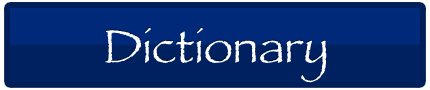
<style>
.page{position:relative;width:430px;height:90px;background:#002160}
.page>*{position:absolute;margin:0}
.t1{font:48px "Papyrus";color:#ffffff}
</style>
<div class="page">
<p class="t1" style="left:105px;top:28px;width:222px;height:55px">Dictionary</p>
</div>
